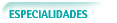
<style>
.page{position:relative;width:117px;height:23px;background:#ffffff}
.page>*{position:absolute;margin:0}
.t1{font:11px "RotisSemiSansExtraBold";color:#07abab}
</style>
<div class="page">
<p class="t1" style="left:9px;top:10px;width:79px;height:8px">ESPECIALIDADES</p>
</div>
